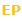
<style>
.page{position:relative;width:22px;height:22px;background:#ffffff}
.page>*{position:absolute;margin:0}
.t1{font:14.4px "Tahoma-Bold";color:#f5c51f;scale:1.07 1}
</style>
<div class="page">
<p class="t1" style="left:2px;top:5px;width:19px;height:10px">EP</p>
</div>
